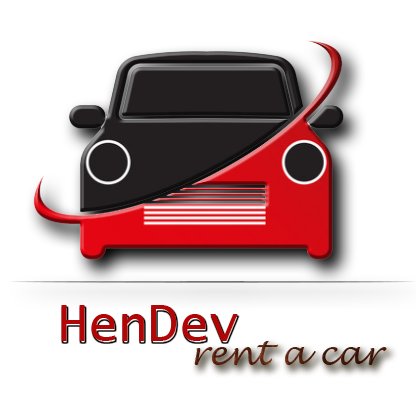
<style>
.page{position:relative;width:416px;height:400px;background:#ffffff}
.page>*{position:absolute;margin:0}
.t1{font:50px "LucidaSans-Typewriter";color:#b20606}
.t2{font:33.3px "LucidaHandwriting-Italic";color:#4f1e0d}
</style>
<div class="page">
<p class="t1" style="left:61px;top:305px;width:177px;height:36px">HenDev</p>
<p class="t2" style="left:194px;top:341px;width:193px;height:24px">rent a car</p>
</div>
